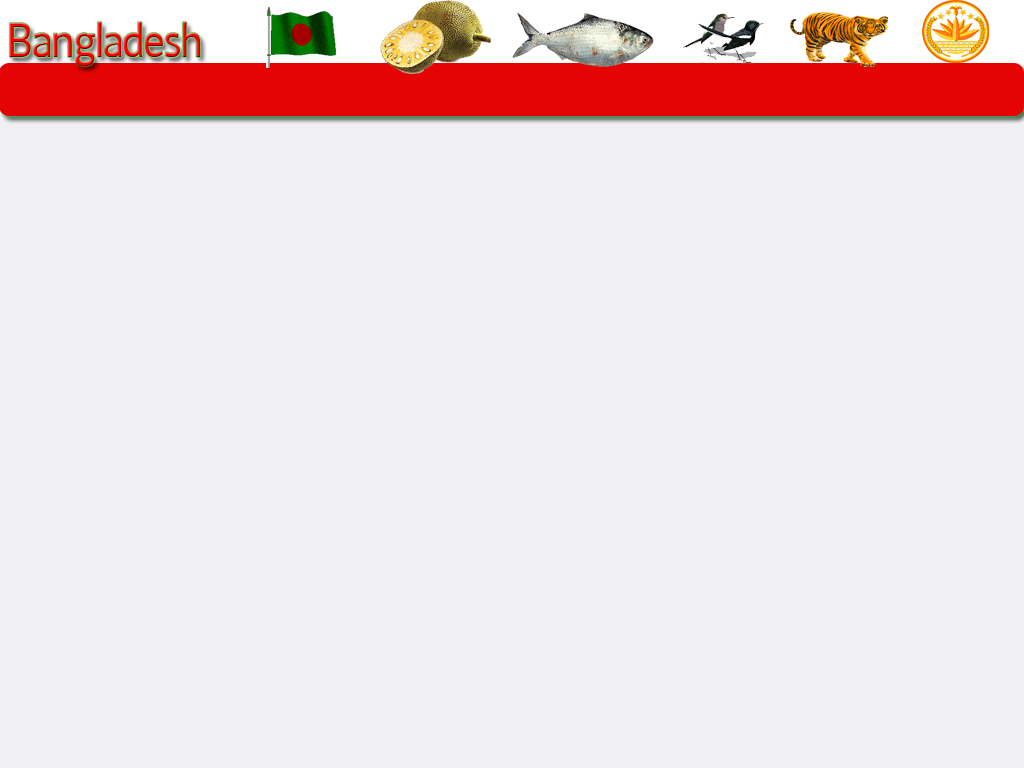
<style>
.page{position:relative;width:1024px;height:768px;background:#f0eff4}
.page>*{position:absolute;margin:0}
.t1{font:48px "Ligurino"}
</style>
<div class="page">
<p class="t1" style="left:9px;top:22px;width:192px;height:44px">Bangladesh</p>
</div>
